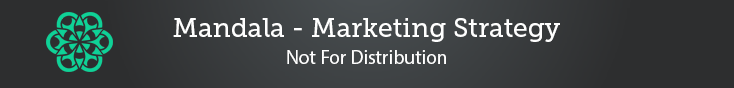
<style>
.page{position:relative;width:734px;height:88px;background:#2d2e2f}
.page>*{position:absolute;margin:0}
.t1{font:26.6px "MuseoSlab-500";color:#ffffff}
.t2{font:19.5px "MyriadPro-Regular";color:#ffffff}
</style>
<div class="page">
<p class="t1" style="left:173px;top:18px;width:387px;height:24px">Mandala - Marketing Strategy</p>
<p class="t2" style="left:287px;top:50px;width:159px;height:14px">Not For Distribution</p>
</div>
